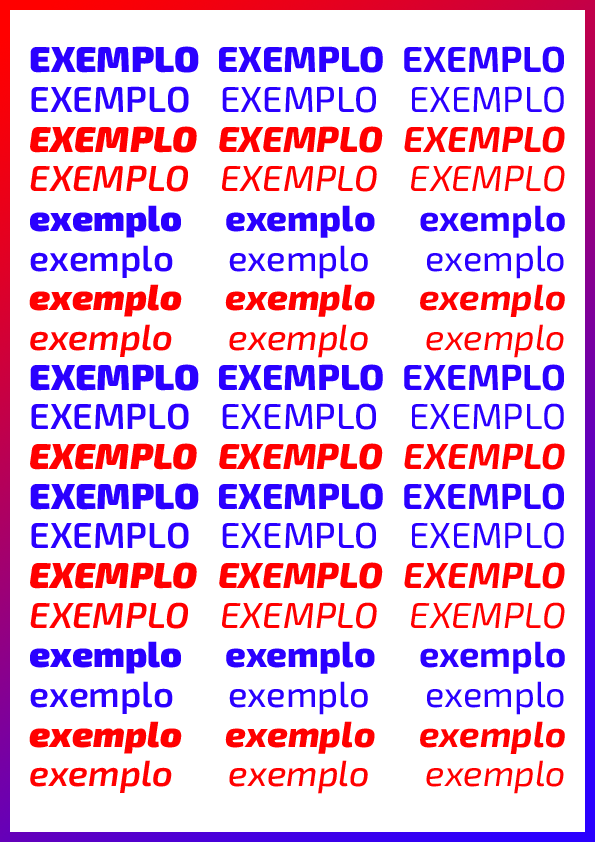
<style>
.page{position:relative;width:595px;height:842px;background:#ffffff}
.page>*{position:absolute;margin:0}
.t1{font:36.1px/39.7px "Exo2Roman-Black";color:#2a00ff}
.t2{font:36.1px/39.7px "Exo2Roman-ExtraBold";color:#2a00ff}
.t3{font:36.1px/39.7px "Exo2Roman-Bold";color:#2a00ff}
.t4{font:36.1px/39.7px "Exo2Roman-SemiBold";color:#2a00ff}
.t5{font:36.1px/39.7px "Exo2Roman-Medium";color:#2a00ff}
.t6{font:36.1px/39.7px "Exo2-Regular";color:#2a00ff}
.t7{font:36.1px/39.7px "Exo2Italic-BlackItalic";color:#ff0000}
.t8{font:36.1px/39.7px "Exo2Italic-ExtraBoldItalic";color:#ff0000}
.t9{font:36.1px/39.7px "Exo2Italic-BoldItalic";color:#ff0000}
.t10{font:36.1px/39.7px "Exo2Italic-SemiBoldItalic";color:#ff0000}
.t11{font:36.1px/39.7px "Exo2Italic-MediumItalic";color:#ff0000}
.t12{font:36.1px/39.7px "Exo2-Italic";color:#ff0000}
</style>
<div class="page">
<p class="t1" style="left:29px;top:46px;width:536px;height:748px;text-align:justify">EXEMPLO <span class="t2">EXEMPLO </span><span class="t3">EXEMPLO </span><span class="t4">EXEMPLO </span><span class="t5">EXEMPLO </span><span class="t6">EXEMPLO </span><span class="t7">EXEMPLO </span><span class="t8">EXEMPLO </span><span class="t9">EXEMPLO </span><span class="t10">EXEMPLO </span><span class="t11">EXEMPLO </span><span class="t12">EXEMPLO </span>exemplo <span class="t2">exemplo </span><span class="t3">exemplo </span><span class="t4">exemplo </span><span class="t5">exemplo </span><span class="t6">exemplo </span><span class="t7">exemplo </span><span class="t8">exemplo </span><span class="t9">exemplo </span><span class="t10">exemplo </span><span class="t11">exemplo </span><span class="t12">exemplo  </span>EXEMPLO <span class="t2">EXEMPLO </span><span class="t3">EXEMPLO </span><span class="t4">EXEMPLO </span><span class="t5">EXEMPLO </span><span class="t6">EXEMPLO </span><span class="t7">EXEMPLO </span><span class="t8">EXEMPLO </span><span class="t9">EXEMPLO<br></span>EXEMPLO <span class="t2">EXEMPLO </span><span class="t3">EXEMPLO </span><span class="t4">EXEMPLO </span><span class="t5">EXEMPLO </span><span class="t6">EXEMPLO </span><span class="t7">EXEMPLO </span><span class="t8">EXEMPLO </span><span class="t9">EXEMPLO </span><span class="t10">EXEMPLO </span><span class="t11">EXEMPLO </span><span class="t12">EXEMPLO </span>exemplo <span class="t2">exemplo </span><span class="t3">exemplo </span><span class="t4">exemplo </span><span class="t5">exemplo </span><span class="t6">exemplo </span><span class="t7">exemplo </span><span class="t8">exemplo </span><span class="t9">exemplo </span><span class="t10">exemplo </span><span class="t11">exemplo </span><span class="t12">exemplo  </span>EXEMPLO <span class="t2">EXEMPLO </span><span class="t3">EXEMPLO </span><span class="t4">EXEMPLO </span><span class="t5">EXEMPLO </span><span class="t6">EXEMPLO </span><span class="t7">EXEMPLO </span><span class="t8">EXEMPLO </span><span class="t9">EXEMPLO </span><span class="t10">EXEMPLO </span><span class="t11">EXEMPLO </span><span class="t12">EXEMPLO</span></p>
</div>
